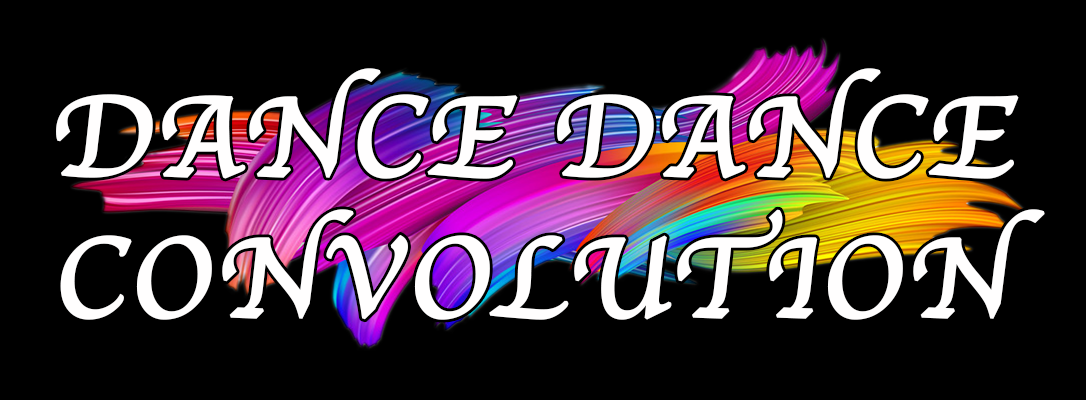
<style>
.page{position:relative;width:1086px;height:400px;background:#000000}
.page>*{position:absolute;margin:0}
.t1{font:117.5px "Apple-Chancery";color:#fffefe;font-weight:bold}
</style>
<div class="page">
<p class="t1" style="left:56px;top:68px;width:989px;height:252px;text-align:center">DANCE DANCE<br>CONVOLUTION</p>
</div>
